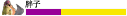
<style>
.page{position:relative;width:127px;height:16px;background:#ffffff}
.page>*{position:absolute;margin:0}
.t1{font:8px "SimSun";letter-spacing:-0.05em;text-transform:uppercase}
</style>
<div class="page">
<p class="t1" style="left:25px;top:0px;width:16px;height:8px">胖子</p>
</div>
